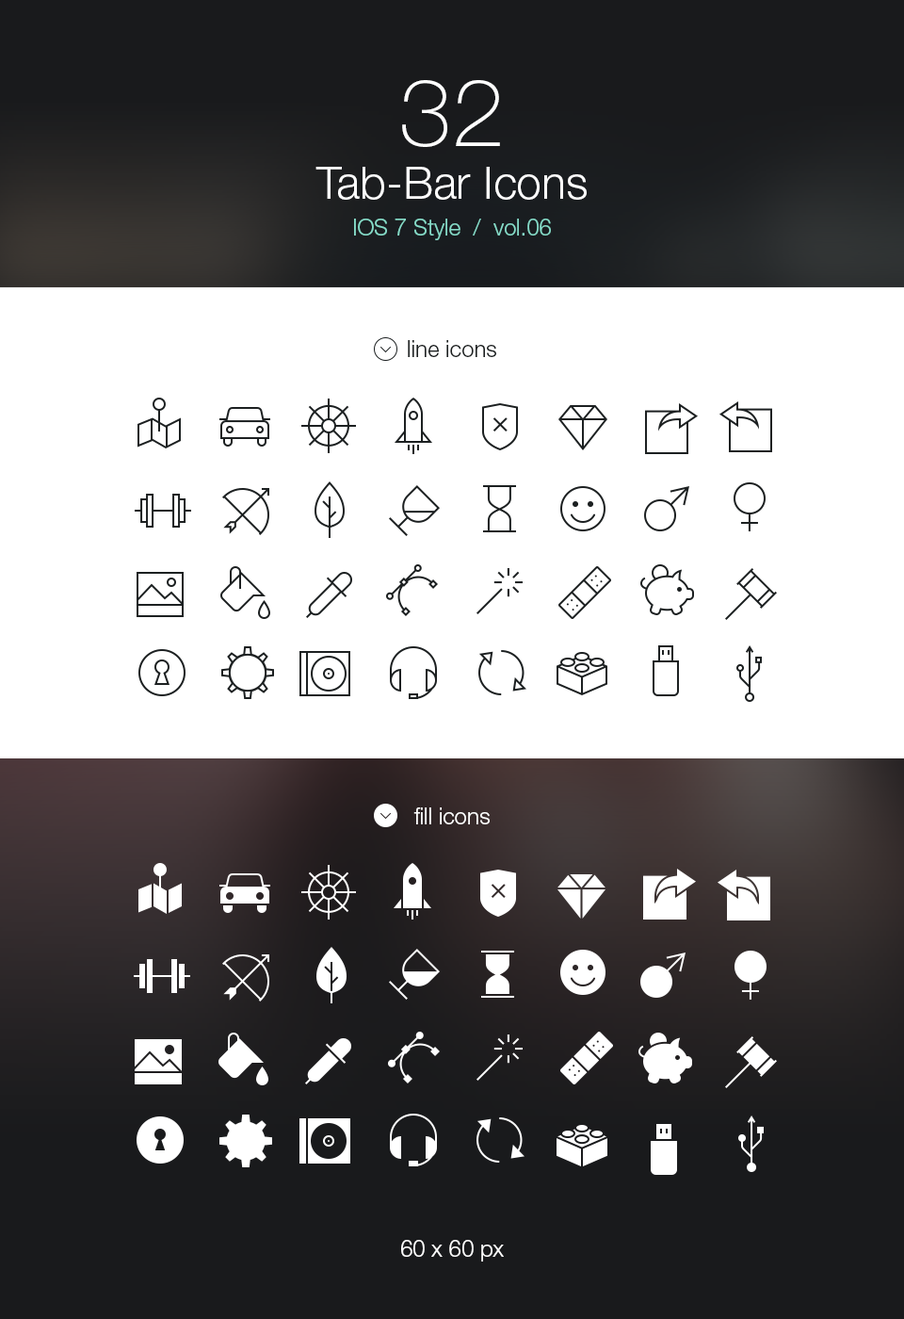
<style>
.page{position:relative;width:904px;height:1319px;background:#ffffff}
.page>*{position:absolute;margin:0}
.t1{font:22.6px/36.7px "HelveticaNeueLTStd-Lt";color:#85dac7}
.t2{font:94.2px/47.1px "HelveticaNeueLTStd-Th";color:#ffffff}
.t3{font:45.2px/52.7px "HelveticaNeueLTStd-Lt";color:#ffffff}
.t4{font:22.6px "HelveticaNeueLTStd-Lt";color:#1c2021}
.t5{font:22.6px "HelveticaNeueLTStd-Lt";color:#ffffff}
</style>
<div class="page">
<p class="t1" style="left:316px;top:80px;width:271px;height:160px;text-align:center"><span class="t2">32<br></span><span class="t3">Tab-Bar Icons<br></span>IOS 7 Style  /  vol.06</p>
<p class="t4" style="left:408px;top:340px;width:88px;height:17px">line icons</p>
<p class="t5" style="left:414px;top:807px;width:76px;height:17px">fill icons</p>
<p class="t5" style="left:401px;top:1240px;width:103px;height:21px">60 x 60 px</p>
</div>
